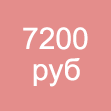
<style>
.page{position:relative;width:111px;height:111px;background:#e48d8b}
.page>*{position:absolute;margin:0}
.t1{font:30px "ArialMT";color:#ffffff}
</style>
<div class="page">
<p class="t1" style="left:23px;top:27px;width:65px;height:23px">7200</p>
<p class="t1" style="left:33px;top:58px;width:47px;height:29px">руб</p>
</div>
